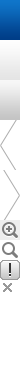
<style>
.page{position:relative;width:20px;height:380px;background:#ffffff}
.page>*{position:absolute;margin:0}
.t1{font:18px "ArialMT";color:#363636;text-transform:uppercase}
</style>
<div class="page">
<p class="t1" style="left:9px;top:263px;width:2px;height:13px">!</p>
</div>
